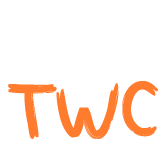
<style>
.page{position:relative;width:160px;height:150px;background:#ffffff}
.page>*{position:absolute;margin:0}
.t1{font:70px "FingerPaint-Regular";color:#ff7b2e}
</style>
<div class="page">
<p class="t1" style="left:8px;top:81px;width:151px;height:58px">TWC</p>
</div>
